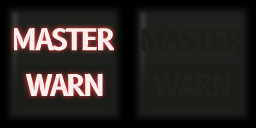
<style>
.page{position:relative;width:256px;height:128px}
.page>*{position:absolute;margin:0}
.t1{font:29.2px "B612-Bold";letter-spacing:-0.075em;color:#1c1d19}
.t2{font:29.2px "B612-Bold";letter-spacing:-0.075em;color:#1f211e}
</style>
<div class="page">
<p class="t1" style="left:140px;top:28px;width:104px;height:23px">MASTER</p>
<p class="t2" style="left:153px;top:74px;width:78px;height:23px">WARN</p>
</div>
